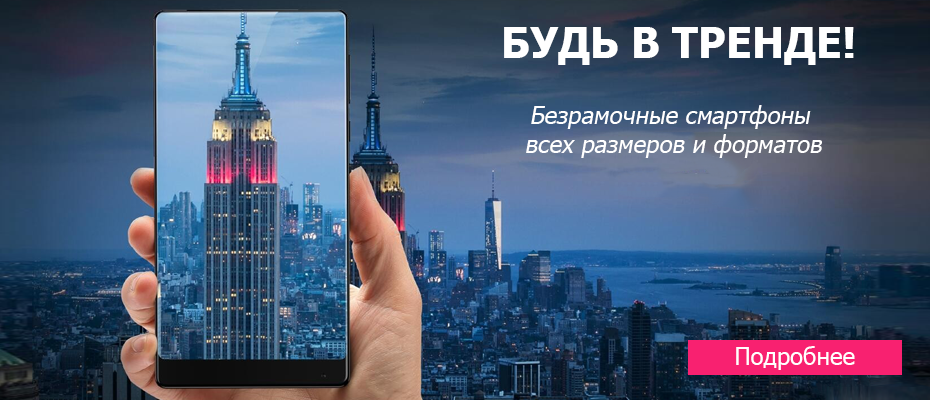
<style>
.page{position:relative;width:930px;height:400px}
.page>*{position:absolute;margin:0}
.t1{font:42.2px "Tahoma-Bold";color:#ffffff}
.t2{font:24px "Tahoma";color:#ffffff;font-style:italic}
.t3{font:24px "Tahoma";color:#ffffff}
</style>
<div class="page">
<p class="t1" style="left:504px;top:27px;width:350px;height:38px">БУДЬ В ТРЕНДЕ!</p>
<p class="t2" style="left:526px;top:105px;width:296px;height:53px;text-align:center">Безрамочные смартфоны <br>всех размеров и форматов</p>
<p class="t3" style="left:736px;top:346px;width:119px;height:24px">Подробнее</p>
</div>
